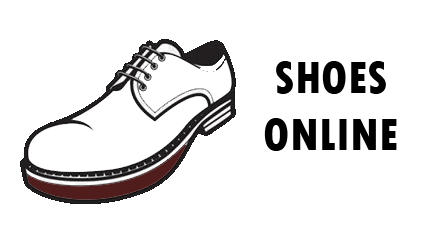
<style>
.page{position:relative;width:440px;height:232px;background:#ffffff}
.page>*{position:absolute;margin:0}
.t1{font:47px "TwCenMT-CondensedExtraBold";color:#000000}
</style>
<div class="page">
<p class="t1" style="left:264px;top:61px;width:133px;height:90px;text-align:center">SHOES ONLINE</p>
</div>
